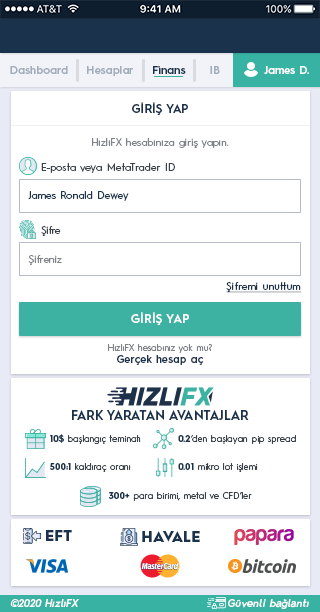
<style>
.page{position:relative;width:320px;height:612px;background:#ffffff}
.page>*{position:absolute;margin:0}
.t1{font:11.1px "HurmeGeometricSans3-SemiBold";color:#a1adbb}
.t2{font:11.1px "HurmeGeometricSans3-SemiBold";color:#1a324c}
.t3{font:11.1px "HurmeGeometricSans3-SemiBold";color:#fefefe}
.t4{font:11.9px "HurmeGeometricSans1-SemiBold";letter-spacing:0.01em;color:#1a324c}
.t5{font:10.2px "HurmeGeometricSans1-Regular";letter-spacing:0.01em;color:#7f8389}
.t6{font:10.2px "HurmeGeometricSans1-Regular";letter-spacing:0.01em;color:#3a4149}
.t7{font:10.2px "HurmeGeometricSans1-Regular";letter-spacing:0.01em;color:#1a324c}
.t8{font:10.2px "HurmeGeometricSans1-Regular";letter-spacing:0.025em;color:#1a324c;text-decoration:underline}
.t9{font:11.9px "HurmeGeometricSans1-SemiBold";letter-spacing:0.025em;color:#ffffff}
.t10{font:9px "HurmeGeometricSans1-Regular";letter-spacing:0.01em;color:#7f8389}
.t11{font:10.2px "HurmeGeometricSans3-SemiBold";letter-spacing:0.025em;color:#1a324c}
.t12{font:12.8px "HurmeGeometricSans1-SemiBold";color:#1a324c}
.t13{font:9px "HurmeGeometricSans1-Regular";color:#3a4149}
.t14{font:9px "HurmeGeometricSans1-Bold";color:#1a324c}
.t15{font:14.5px "HurmeGeometricSans1-Black";letter-spacing:0.025em;color:#1a324c}
.t16{font:10.2px "HurmeGeometricSans2-SemiBoldObl";letter-spacing:0.025em;color:#ffffff}
</style>
<div class="page">
<p class="t1" style="left:10px;top:66px;width:58px;height:8px">Dashboard</p>
<p class="t1" style="left:87px;top:66px;width:46px;height:10px">Hesaplar</p>
<p class="t2" style="left:153px;top:66px;width:33px;height:8px">Finans</p>
<p class="t1" style="left:210px;top:66px;width:10px;height:8px">IB</p>
<p class="t3" style="left:264px;top:66px;width:45px;height:8px">James D.</p>
<p class="t4" style="left:132px;top:102px;width:56px;height:13px">GİRİŞ YAP</p>
<p class="t5" style="left:92px;top:138px;width:137px;height:10px">HızlıFX hesabınıza giriş yapın.</p>
<p class="t6" style="left:41px;top:163px;width:134px;height:10px">E-posta veya MetaTrader ID</p>
<p class="t7" style="left:28px;top:191px;width:101px;height:10px">James Ronald Dewey</p>
<p class="t6" style="left:41px;top:226px;width:20px;height:10px">Şifre</p>
<p class="t5" style="left:28px;top:255px;width:34px;height:10px">Şifreniz</p>
<p class="t8" style="left:226px;top:282px;width:75px;height:11px">Şifremi unuttum</p>
<p class="t9" style="left:131px;top:312px;width:58px;height:13px">GİRİŞ YAP</p>
<p class="t10" style="left:108px;top:344px;width:104px;height:9px">HızlıFX hesabınız yok mu?</p>
<p class="t11" style="left:117px;top:355px;width:87px;height:10px">Gerçek hesap aç</p>
<p class="t12" style="left:72px;top:410px;width:177px;height:10px">FARK YARATAN AVANTAJLAR</p>
<p class="t13" style="left:50px;top:434px;width:91px;height:10px"><span class="t14">10$</span> başlangıç teminatı</p>
<p class="t13" style="left:178px;top:435px;width:118px;height:9px"><span class="t14">0.2</span>‘den başlayan pip spread</p>
<p class="t13" style="left:49px;top:463px;width:82px;height:9px"><span class="t14">500:1</span> kaldıraç oranı</p>
<p class="t13" style="left:178px;top:463px;width:80px;height:9px"><span class="t14">0.01</span> mikro lot işlemi</p>
<p class="t13" style="left:108px;top:492px;width:144px;height:9px"><span class="t14">300+</span> para birimi, metal ve CFD’ler</p>
<p class="t15" style="left:46px;top:530px;width:26px;height:11px">EFT</p>
<p class="t15" style="left:142px;top:531px;width:58px;height:11px">HAVALE</p>
<p class="t16" style="left:10px;top:599px;width:69px;height:8px">©2020 HızlıFX</p>
<p class="t16" style="left:228px;top:599px;width:81px;height:10px">Güvenli bağlantı</p>
</div>
